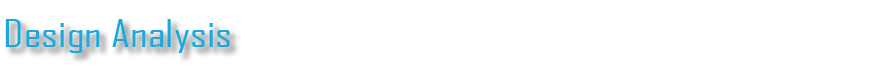
<style>
.page{position:relative;width:875px;height:74px;background:#ffffff}
.page>*{position:absolute;margin:0}
.t1{font:36.1px "AgencyFB-Reg";color:#1ca8dd;scale:1.3 1}
</style>
<div class="page">
<p class="t1" style="left:5px;top:19px;width:225px;height:34px">Design Analysis</p>
</div>
